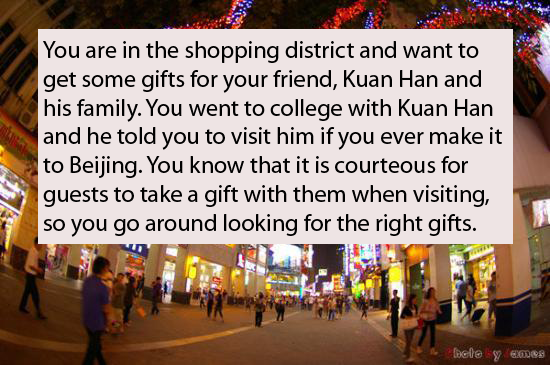
<style>
.page{position:relative;width:550px;height:365px;background:#eee4e4}
.page>*{position:absolute;margin:0}
.t1{font:24px "MyriadPro-Regular";color:#010101}
</style>
<div class="page">
<p class="t1" style="left:43px;top:41px;width:459px;height:196px">You are in the shopping district and want to get some gifts for your friend, Kuan Han and his family. You went to college with Kuan Han and he told you to visit him if you ever make it to Beijing. You know that it is courteous for guests to take a gift with them when visiting, so you go around looking for the right gifts.</p>
</div>
